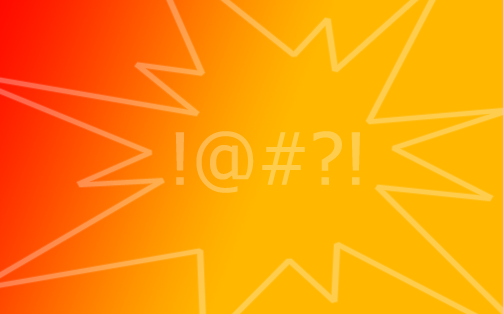
<style>
.page{position:relative;width:503px;height:314px;background:#ffb700}
.page>*{position:absolute;margin:0}
.t1{font:72px "Tahoma";color:#ffc94d}
</style>
<div class="page">
<p class="t1" style="left:175px;top:131px;width:185px;height:62px">!@#?!</p>
</div>
